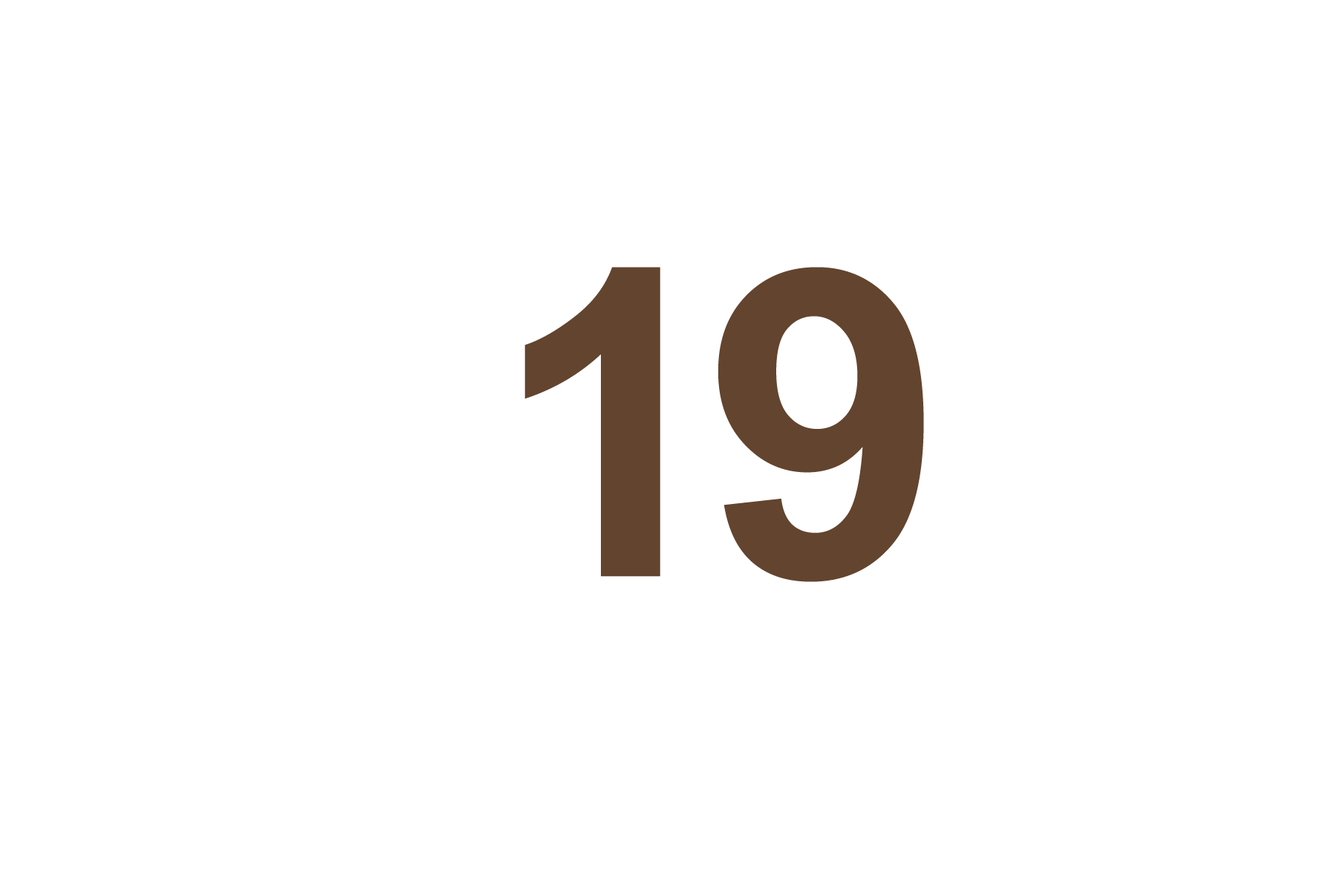
<style>
.page{position:relative;width:1337px;height:892px;background:#ffffff}
.page>*{position:absolute;margin:0}
.t1{font:429.6px "Arial-BoldMT";color:#63442f}
</style>
<div class="page">
<p class="t1" style="left:525px;top:267px;width:399px;height:315px">19</p>
</div>
